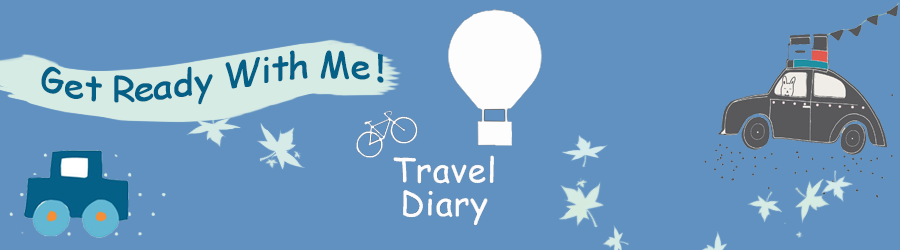
<style>
.page{position:relative;width:900px;height:250px;background:#6191c1}
.page>*{position:absolute;margin:0}
.t1{font:36px "ComicSansMS";color:#046087}
.t2{font:36px "AdobeHeitiStd-Regular";color:#046087}
</style>
<div class="page">
<p class="t1" style="left:41px;top:50px;width:343px;height:55px">Get Ready With Me<span class="t2">！</span></p>
</div>
